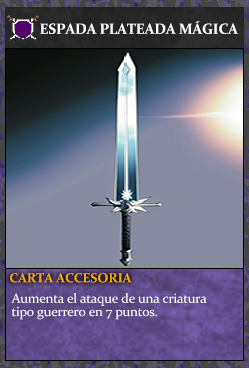
<style>
.page{position:relative;width:249px;height:368px}
.page>*{position:absolute;margin:0}
.t1{font:14.7px "Constantia-Bold";letter-spacing:-0.02em;color:#ffffff}
.t2{font:13.3px "Constantia-Bold";letter-spacing:-0.02em;color:#f2ac05}
.t3{font:13.3px/13.3px "Constantia";letter-spacing:-0.02em;color:#ffffff}
</style>
<div class="page">
<p class="t1" style="left:40px;top:21px;width:199px;height:13px">ESPADA PLATEADA MÁGICA</p>
<p class="t2" style="left:10px;top:273px;width:122px;height:10px">CARTA ACCESORIA</p>
<p class="t3" style="left:11px;top:293px;width:196px;height:27px">Aumenta el ataque de una criatura<br>tipo guerrero en 7 puntos.</p>
</div>
